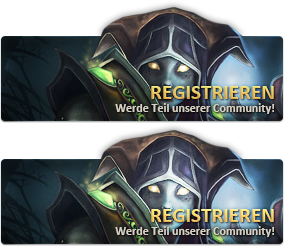
<style>
.page{position:relative;width:284px;height:246px}
.page>*{position:absolute;margin:0}
.t1{font:21px "Calibri-Bold";text-transform:uppercase}
.t2{font:12px "Calibri-Bold";color:#d8d2c6}
</style>
<div class="page">
<p class="t1" style="left:151px;top:86px;width:123px;height:13px">Registrieren</p>
<p class="t2" style="left:115px;top:103px;width:160px;height:11px">Werde Teil unserer Community!</p>
<p class="t1" style="left:151px;top:209px;width:123px;height:13px">Registrieren</p>
<p class="t2" style="left:115px;top:226px;width:160px;height:11px">Werde Teil unserer Community!</p>
</div>
